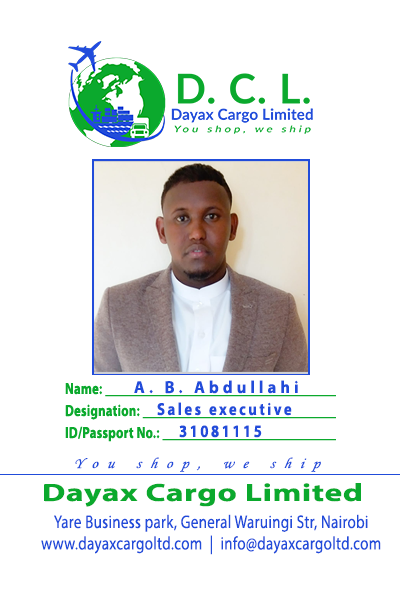
<style>
.page{position:relative;width:400px;height:590px;background:#ffffff}
.page>*{position:absolute;margin:0}
.t1{font:17.4px "MyriadPro-Bold";letter-spacing:0.25em;color:#214cda;scale:0.94 1}
.t2{font:17.4px "MyriadPro-Bold";letter-spacing:0.17em;color:#214cda;scale:0.85 1}
.t3{font:15.2px "MonotypeCorsiva";letter-spacing:0.58em;color:#214cda;font-style:italic;scale:1.03 1}
.t4{font:25px "MyriadPro-Bold";letter-spacing:0.02em;color:#0ba92d;scale:1.34 1}
.t5{font:18.3px/21.4px "MyriadPro-Regular";letter-spacing:0.02em;color:#214cda;scale:0.82 1}
</style>
<div class="page">
<p class="t1" style="left:134px;top:380px;width:164px;height:14px">A. B. Abdullahi</p>
<p class="t2" style="left:157px;top:402px;width:135px;height:14px">Sales executive</p>
<p class="t2" style="left:179px;top:425px;width:83px;height:13px">31081115</p>
<p class="t3" style="left:75px;top:457px;width:246px;height:15px">You shop, we ship</p>
<p class="t4" style="left:44px;top:483px;width:317px;height:24px">Dayax Cargo Limited</p>
<p class="t5" style="left:41px;top:514px;width:340px;height:41px;text-align:center">Yare Business park, General Waruingi Str, Nairobi<br>www.dayaxcargoltd.com  |  info@dayaxcargoltd.com</p>
</div>
